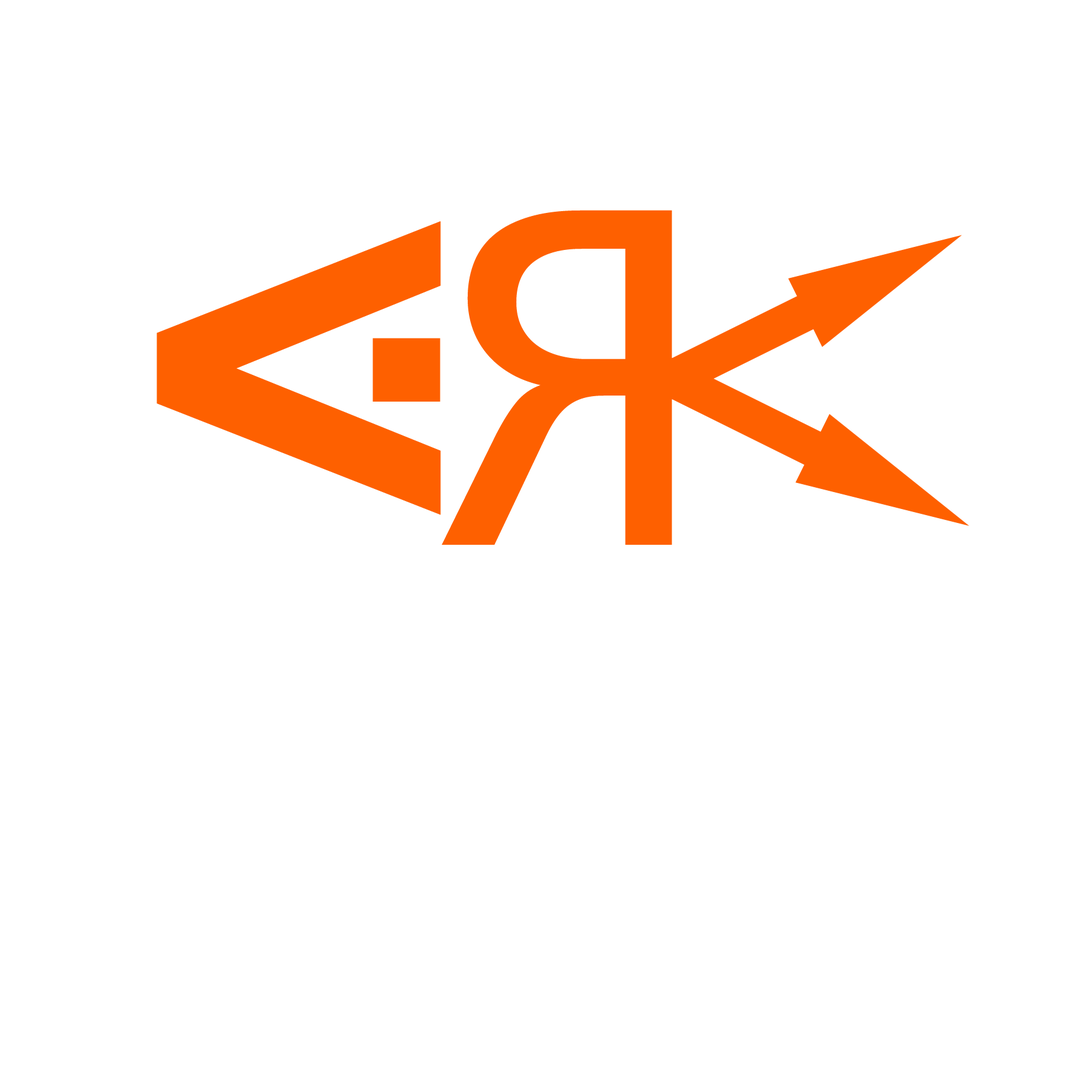
<style>
.page{position:relative;width:1092px;height:1092px;background:#ffffff}
.page>*{position:absolute;margin:0}
.t1{font:524px "Consolas";color:#fe6000}
.t2{font:345.1px "7thServiceCondensed";color:#fe6000;scale:1.09 1}
</style>
<div class="page">
<p class="t1" style="left:442px;top:210px;width:230px;height:335px;rotate:180deg">R</p>
<p class="t2" style="left:157px;top:221px;width:284px;height:294px;rotate:-90deg">A</p>
</div>
